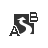
<style>
.page{position:relative;width:48px;height:48px;background:#ffffff}
.page>*{position:absolute;margin:0}
.t1{font:14px "Biondi";color:#333333;scale:0.75 1}
</style>
<div class="page">
<p class="t1" style="left:30px;top:12px;width:8px;height:10px">B</p>
<p class="t1" style="left:9px;top:26px;width:11px;height:10px">A</p>
</div>
